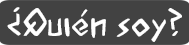
<style>
.page{position:relative;width:189px;height:45px;background:#424242}
.page>*{position:absolute;margin:0}
.t1{font:34.9px "AcadianRunes-Regular";color:#ffffff}
</style>
<div class="page">
<p class="t1" style="left:7px;top:7px;width:175px;height:35px">¿Quién soy?</p>
</div>
